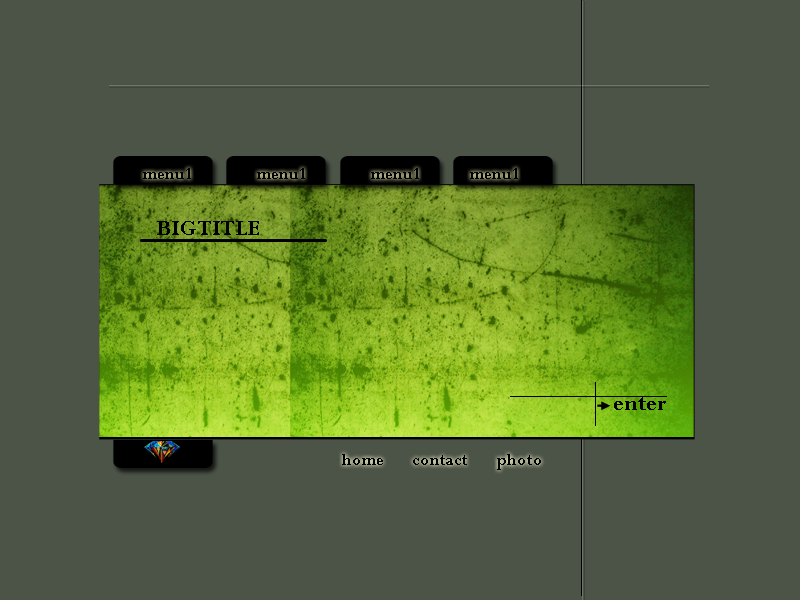
<style>
.page{position:relative;width:800px;height:600px;background:#4c5448}
.page>*{position:absolute;margin:0}
.t1{font:18px "Perpetua-Bold";color:#000000}
.t2{font:24px "Perpetua-Bold";color:#000000}
</style>
<div class="page">
<p class="t1" style="left:143px;top:168px;width:48px;height:11px">menu1</p>
<p class="t1" style="left:257px;top:168px;width:48px;height:11px">menu1</p>
<p class="t1" style="left:371px;top:168px;width:48px;height:11px">menu1</p>
<p class="t1" style="left:470px;top:168px;width:48px;height:11px">menu1</p>
<p class="t2" style="left:157px;top:221px;width:102px;height:14px">BIG TITLE</p>
<p class="t2" style="left:614px;top:397px;width:52px;height:13px">enter</p>
<p class="t1" style="left:342px;top:454px;width:41px;height:11px">home</p>
<p class="t1" style="left:413px;top:455px;width:54px;height:10px">contact</p>
<p class="t1" style="left:497px;top:454px;width:44px;height:16px">photo</p>
</div>
